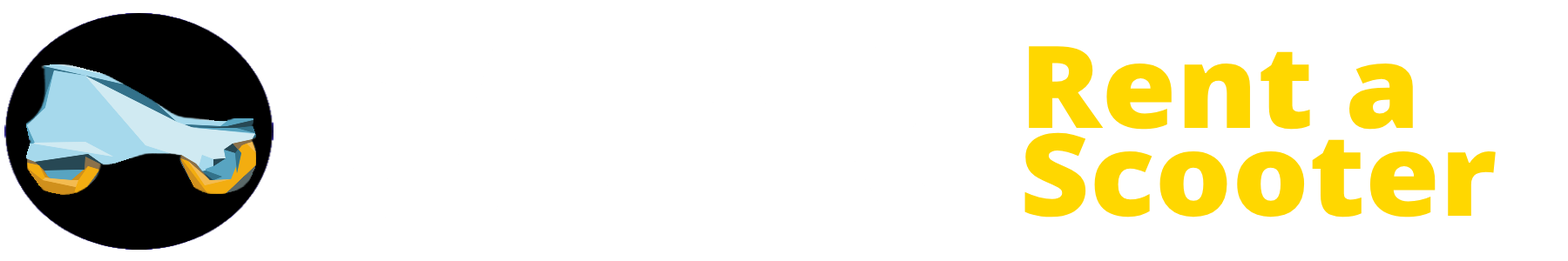
<style>
.page{position:relative;width:1568px;height:261px;background:#ffffff}
.page>*{position:absolute;margin:0}
.t1{font:114.5px/87.7px "OpenSans-ExtraBold";color:#ffd700;scale:1.06 1}
</style>
<div class="page">
<p class="t1" style="left:1024px;top:46px;width:472px;height:172px">Rent a<br>Scooter</p>
</div>
